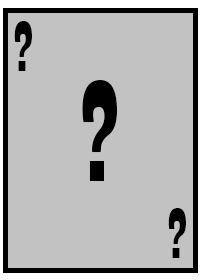
<style>
.page{position:relative;width:200px;height:280px;background:#c2c2c2}
.page>*{position:absolute;margin:0}
.t1{font:75px "Playbill";color:#000000}
.t2{font:150px "Playbill";color:#000000}
</style>
<div class="page">
<p class="t1" style="left:14px;top:21px;width:18px;height:50px">?</p>
<p class="t2" style="left:82px;top:80px;width:35px;height:101px">?</p>
<p class="t1" style="left:168px;top:208px;width:18px;height:50px">?</p>
</div>
